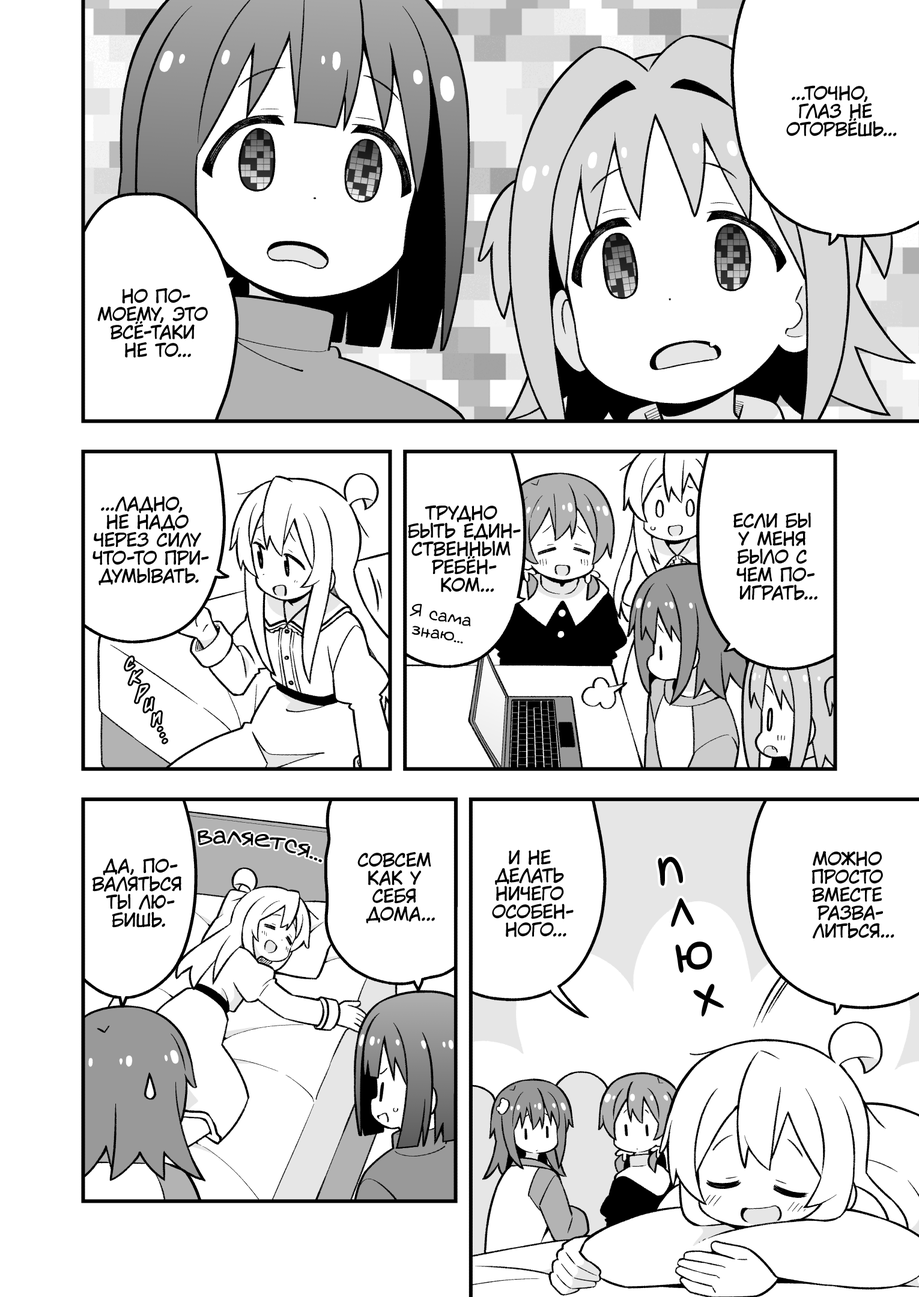
<style>
.page{position:relative;width:919px;height:1297px;background:#ffffff}
.page>*{position:absolute;margin:0}
.t1{font:18px "KuraiVoice2";color:#000000;text-transform:uppercase}
.t2{font:18px "v_Augie";color:#000000}
.t3{font:21.6px "v_CCDearDiary";color:#ffffff}
.t4{font:18px "v_CCDearDiary";color:#ffffff}
.t5{font:25.2px "v_Augie";color:#000000}
.t6{font:54.1px "laCartoonerie";color:#000000}
</style>
<div class="page">
<p class="t1" style="left:786px;top:85px;width:111px;height:52px;text-align:center">...Точно,<br>глаз не<br>оторвёшь...</p>
<p class="t1" style="left:97px;top:288px;width:111px;height:70px;text-align:center">Но по-<br>моему, это<br>всё-таки<br>не то...</p>
<p class="t1" style="left:93px;top:496px;width:116px;height:90px;text-align:center">...Ладно,<br>не надо<br>через силу<br>что-то при-<br>думывать.</p>
<p class="t1" style="left:408px;top:505px;width:113px;height:87px;text-align:center">Трудно<br>быть един-<br>ственным<br>ребён-<br>ком...</p>
<p class="t1" style="left:733px;top:512px;width:85px;height:89px;text-align:center">Если бы<br>у меня<br>было с<br>чем по-<br>играть...</p>
<p class="t2" style="left:410px;top:604px;width:61px;height:40px;text-align:center;rotate:10deg">Я сама<br>знаю...</p>
<p class="t3" style="left:126px;top:657px;width:8px;height:13px;rotate:-8deg">с</p>
<p class="t3" style="left:129px;top:670px;width:13px;height:15px;rotate:-3deg">к</p>
<p class="t3" style="left:136px;top:685px;width:12px;height:18px;rotate:-5deg">р</p>
<p class="t3" style="left:144px;top:698px;width:10px;height:14px;rotate:-11deg">и</p>
<p class="t3" style="left:152px;top:712px;width:9px;height:14px;rotate:-17deg">п</p>
<p class="t4" style="left:159px;top:727px;width:3px;height:4px">.</p>
<p class="t4" style="left:161px;top:733px;width:4px;height:4px">.</p>
<p class="t4" style="left:163px;top:739px;width:4px;height:4px">.</p>
<p class="t5" style="left:198px;top:830px;width:124px;height:33px;rotate:8deg">валяется...</p>
<p class="t1" style="left:92px;top:858px;width:89px;height:70px;text-align:center">Да, по-<br>валяться<br>ты лю-<br>бишь.</p>
<p class="t1" style="left:357px;top:852px;width:78px;height:72px;text-align:center">Совсем<br>как у<br>себя<br>дома...</p>
<p class="t1" style="left:492px;top:850px;width:82px;height:88px;text-align:center">И не<br>делать<br>ничего<br>особен-<br>ного...</p>
<p class="t6" style="left:658px;top:857px;width:25px;height:29px;rotate:-5deg">п</p>
<p class="t1" style="left:812px;top:851px;width:82px;height:88px;text-align:center">Можно<br>просто<br>вместе<br>разва-<br>литься...</p>
<p class="t6" style="left:671px;top:898px;width:23px;height:29px;rotate:-3deg">л</p>
<p class="t6" style="left:675px;top:942px;width:37px;height:31px;rotate:-9deg">ю</p>
<p class="t6" style="left:693px;top:984px;width:31px;height:33px;rotate:-18deg">х</p>
</div>
